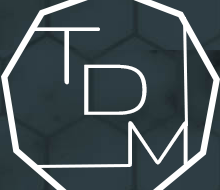
<style>
.page{position:relative;width:220px;height:190px;background:#2e3d44}
.page>*{position:absolute;margin:0}
.t1{font:104.2px "Gruppo";letter-spacing:0.15em;color:#ffffff}
.t2{font:91.7px "Gruppo";letter-spacing:0.15em;color:#ffffff}
.t3{font:83.3px "Gruppo";letter-spacing:0.15em;color:#ffffff}
</style>
<div class="page">
<p class="t1" style="left:33px;top:27px;width:67px;height:58px">T</p>
<p class="t2" style="left:84px;top:64px;width:63px;height:51px">D</p>
<p class="t3" style="left:128px;top:121px;width:60px;height:46px">M</p>
</div>
